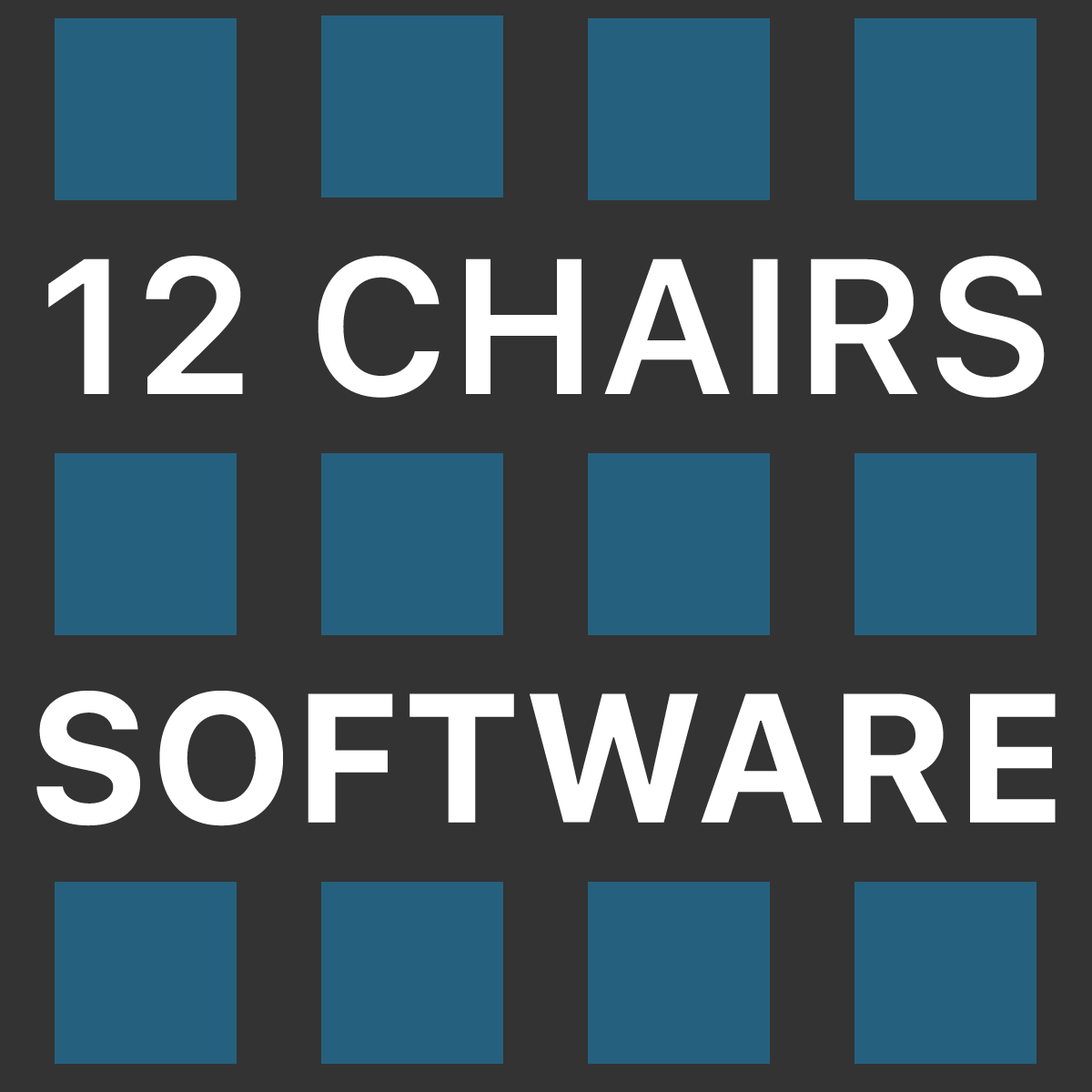
<style>
.page{position:relative;width:1092px;height:1092px;background:#333333}
.page>*{position:absolute;margin:0}
.t1{font:191.1px "SFUIText-Semibold";color:#ffffff}
.t2{font:182px "SFUIText-Bold";color:#ffffff}
</style>
<div class="page">
<p class="t1" style="left:48px;top:256px;width:997px;height:142px">12 CHAIRS</p>
<p class="t2" style="left:36px;top:691px;width:1020px;height:135px">SOFTWARE</p>
</div>
